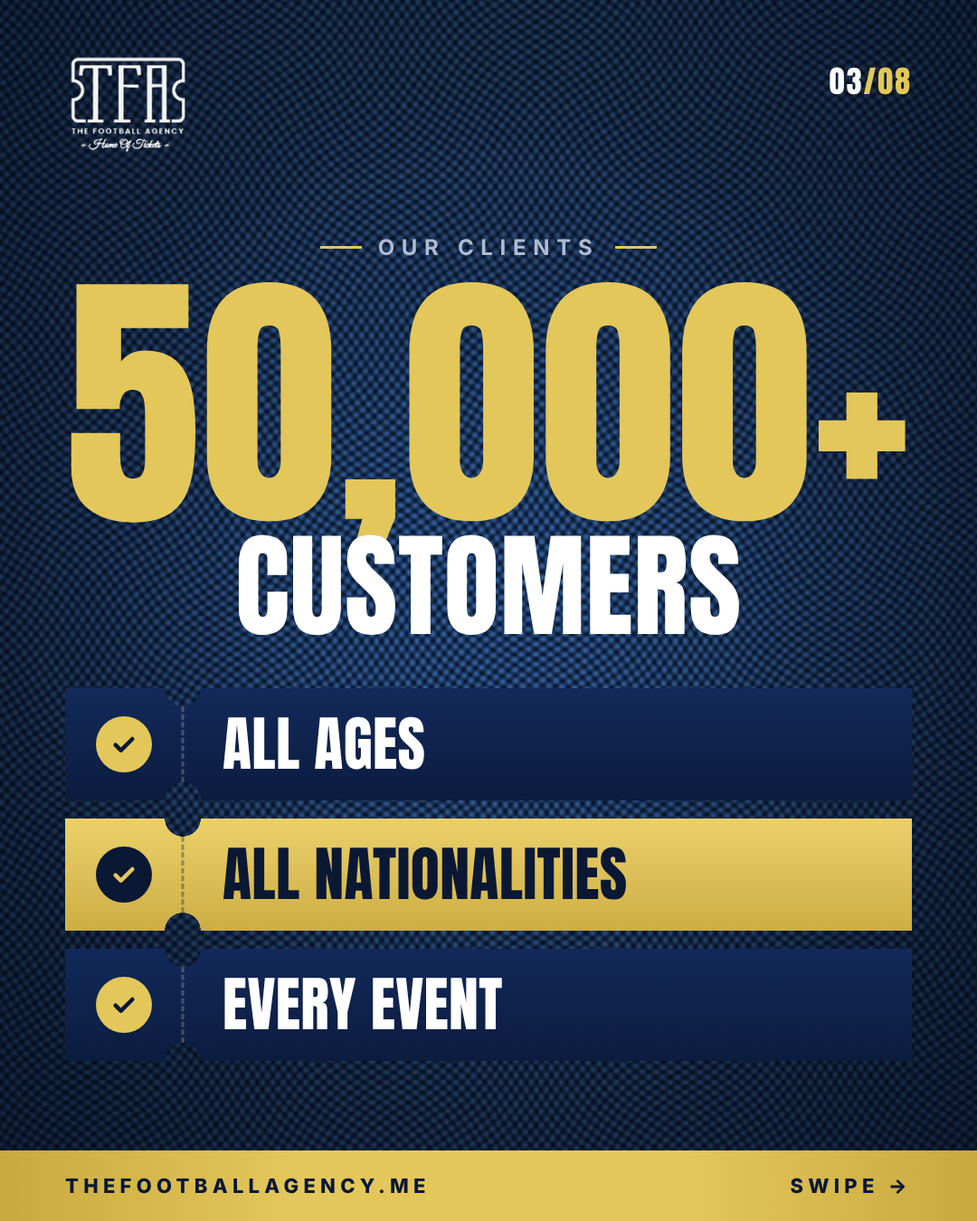
<style>
.page{position:relative;width:977px;height:1221px}
.page>*{position:absolute;margin:0}
.t1{font:30.7px "Anton-Regular";letter-spacing:0.06em;color:#e3c75a}
.t2{font:30.7px "Anton-Regular";letter-spacing:0.06em;color:#ffffff}
.t3{font:21.7px "Inter-Bold";letter-spacing:0.32em;color:#aebbd3}
.t4{font:273.3px "Anton-Regular";letter-spacing:0.005em;color:#e3c75a}
.t5{font:114.3px "Anton-Regular";letter-spacing:0.005em;color:#ffffff}
.t6{font:59.7px "Anton-Regular";letter-spacing:0.005em;color:#ffffff}
.t7{font:59.7px "Anton-Regular";letter-spacing:0.005em;color:#0a1834}
.t8{font:19.9px "Inter-ExtraBold";letter-spacing:0.24em;color:#0a1834}
</style>
<div class="page">
<p class="t1" style="left:829px;top:67px;width:81px;height:28px"><span class="t2">03</span>/08</p>
<p class="t3" style="left:378px;top:239px;width:213px;height:17px">OUR CLIENTS</p>
<p class="t4" style="left:71px;top:282px;width:834px;height:269px">50,000+</p>
<p class="t5" style="left:238px;top:534px;width:501px;height:101px">CUSTOMERS</p>
<p class="t6" style="left:223px;top:716px;width:201px;height:54px">ALL AGES</p>
<p class="t7" style="left:223px;top:846px;width:403px;height:54px">ALL NATIONALITIES</p>
<p class="t6" style="left:224px;top:978px;width:278px;height:51px">EVERY EVENT</p>
<p class="t8" style="left:65px;top:1177px;width:360px;height:17px">THEFOOTBALLAGENCY.ME</p>
<p class="t8" style="left:790px;top:1177px;width:115px;height:17px">SWIPE →</p>
</div>
